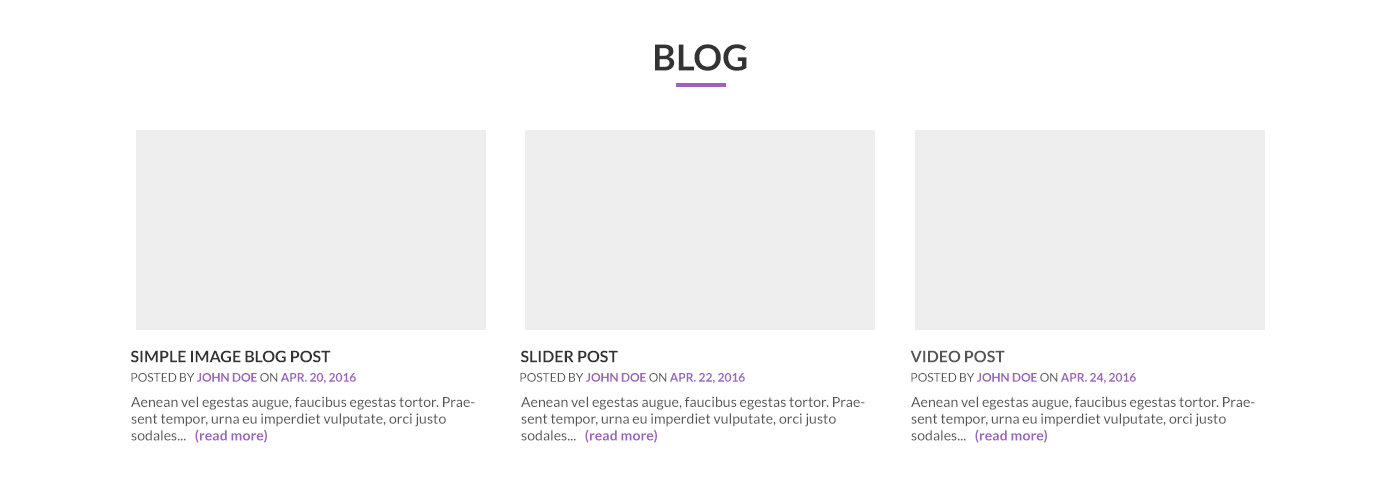
<style>
.page{position:relative;width:1400px;height:500px;background:#ffffff}
.page>*{position:absolute;margin:0}
.t1{font:36px "Lato-Bold";letter-spacing:0.005em;color:#333333}
.t2{font:16px "Lato-Bold";color:#333333}
.t3{font:16px "Lato-Bold";color:#555555}
.t4{font:12px "Lato-Bold";color:#9b64b8}
.t5{font:12px "Lato-Regular";color:#555555}
.t6{font:14px "Lato-Regular";letter-spacing:0.005em;color:#555555}
.t7{font:14px "Lato-Bold";letter-spacing:0.005em;color:#9b64b8}
</style>
<div class="page">
<p class="t1" style="left:655px;top:44px;width:92px;height:27px">BLOG</p>
<p class="t2" style="left:130px;top:350px;width:201px;height:13px">SIMPLE IMAGE BLOG POST</p>
<p class="t2" style="left:520px;top:350px;width:98px;height:13px">SLIDER POST</p>
<p class="t3" style="left:910px;top:350px;width:95px;height:13px">VIDEO POST</p>
<p class="t4" style="left:131px;top:373px;width:225px;height:11px"><span class="t5">POSTED BY </span>JOHN DOE<span class="t5"> ON </span>APR. 20, 2016</p>
<p class="t4" style="left:520px;top:373px;width:225px;height:11px"><span class="t5">POSTED BY </span>JOHN DOE<span class="t5"> ON </span>APR. 22, 2016</p>
<p class="t4" style="left:911px;top:373px;width:225px;height:11px"><span class="t5">POSTED BY </span>JOHN DOE<span class="t5"> ON </span>APR. 24, 2016</p>
<p class="t6" style="left:131px;top:396px;width:344px;height:47px">Aenean vel egestas augue, faucibus egestas tortor. Praesent tempor, urna eu imperdiet vulputate, orci justo sodales...   <span class="t7">(read more)</span></p>
<p class="t6" style="left:521px;top:396px;width:344px;height:47px">Aenean vel egestas augue, faucibus egestas tortor. Praesent tempor, urna eu imperdiet vulputate, orci justo sodales...   <span class="t7">(read more)</span></p>
<p class="t6" style="left:911px;top:396px;width:344px;height:47px">Aenean vel egestas augue, faucibus egestas tortor. Praesent tempor, urna eu imperdiet vulputate, orci justo sodales...   <span class="t7">(read more)</span></p>
</div>
